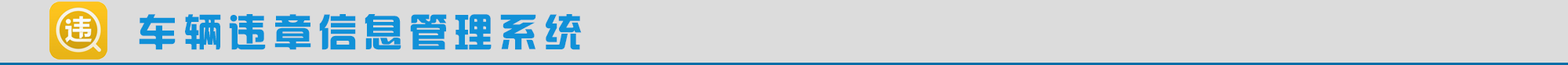
<style>
.page{position:relative;width:1568px;height:65px;background:#dcdcdc}
.page>*{position:absolute;margin:0}
.t1{font:37.6px "FZHZGBJW--GB1-0";letter-spacing:0.2em;color:#1191d8}
</style>
<div class="page">
<p class="t1" style="left:139px;top:14px;width:443px;height:36px">车辆违章信息管理系统</p>
</div>
